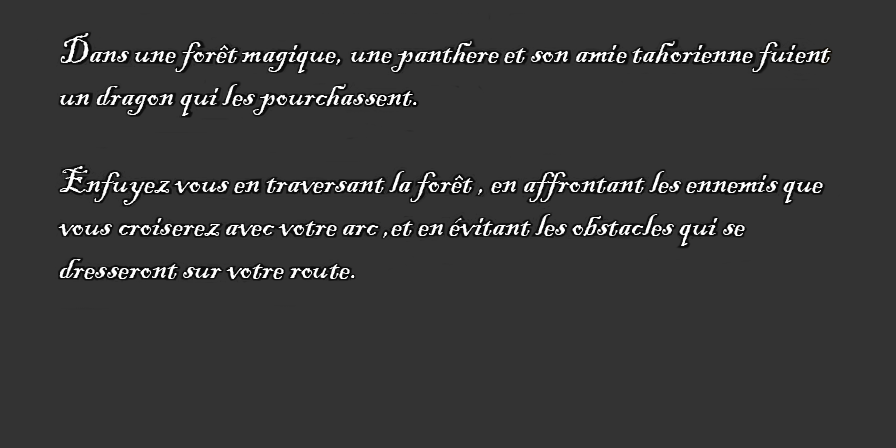
<style>
.page{position:relative;width:896px;height:448px;background:#333333}
.page>*{position:absolute;margin:0}
.t1{font:36px "BlackadderITC-Regular";color:#ffffff}
</style>
<div class="page">
<p class="t1" style="left:58px;top:33px;width:773px;height:246px">Dans une forêt magique, une panthere et son amie tahorienne fuient un dragon qui les pourchassent. <br><br>Enfuyez vous en traversant la forêt , en affrontant les ennemis que vous croiserez avec votre arc ,et en évitant les obstacles qui se dresseront sur votre route.</p>
</div>
